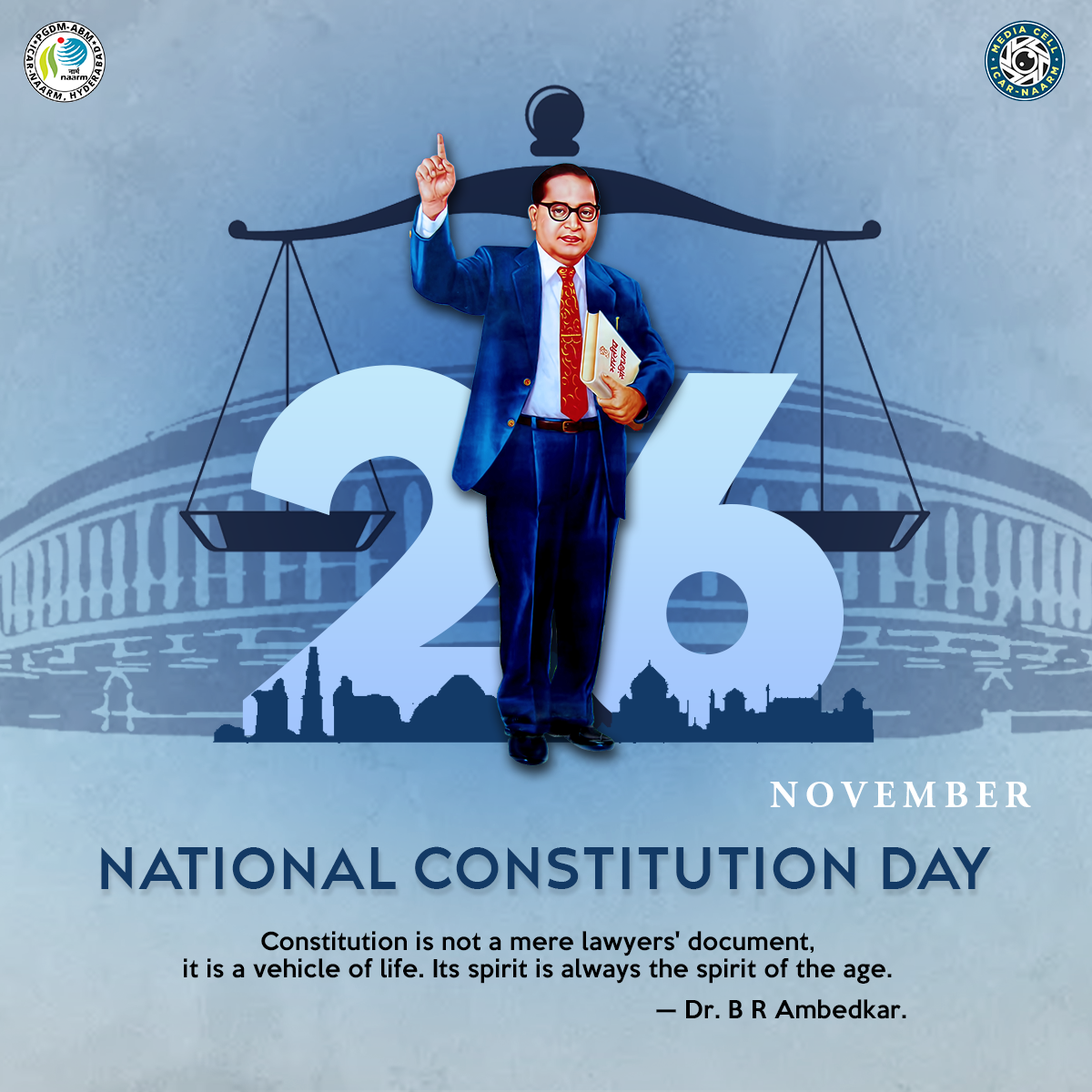
<style>
.page{position:relative;width:1092px;height:1092px}
.page>*{position:absolute;margin:0}
.t1{font:460.3px "LEMONMILK-Bold";letter-spacing:0.01em}
.t2{font:37.3px "AGaramondPro-Bold";letter-spacing:0.2em;color:#ffffff}
.t3{font:60.7px "Agency-Regular";letter-spacing:0.05em;color:#133a65}
.t4{font:22.7px "KeepCalm-Medium";letter-spacing:0.01em;color:#000000}
.t5{font:22.7px/41.7px "KeepCalm-Medium";letter-spacing:0.01em;color:#000000}
</style>
<div class="page">
<p class="t1" style="left:242px;top:365px;width:602px;height:378px">26</p>
<p class="t2" style="left:770px;top:781px;width:261px;height:27px">NOVEMBER</p>
<p class="t3" style="left:101px;top:846px;width:890px;height:43px">National Constitution Day</p>
<p class="t4" style="left:184px;top:931px;width:722px;height:88px;text-align:center">Constitution is not a mere lawyers' document, <br>it is a vehicle of life. Its spirit is always the spirit of the age. <br>                                                                 <span class="t5">— Dr. B R Ambedkar.</span></p>
</div>
